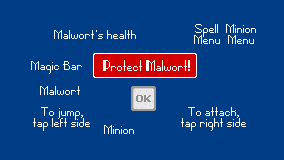
<style>
.page{position:relative;width:284px;height:160px;background:#003d87}
.page>*{position:absolute;margin:0}
.t1{font:8px "Pixel-Noir-Skinny-Short";color:#ffffff}
.t2{font:8px/11px "Pixel-Noir-Skinny-Short";color:#ffffff}
.t3{font:8px "Pixel-Noir-Regular";color:#ffffff}
.t4{font:8px "PressStart2P";color:#8e8e8e}
</style>
<div class="page">
<p class="t1" style="left:54px;top:30px;width:82px;height:9px">Malwort s health</p>
<p class="t2" style="left:194px;top:24px;width:26px;height:20px;text-align:center">Spell<br>Menu</p>
<p class="t2" style="left:226px;top:24px;width:30px;height:20px;text-align:center">Minion<br>Menu</p>
<p class="t1" style="left:31px;top:61px;width:51px;height:13px">Magic Bar</p>
<p class="t3" style="left:103px;top:60px;width:87px;height:11px">Protect Malwort!</p>
<p class="t1" style="left:40px;top:86px;width:40px;height:9px">Malwort</p>
<p class="t4" style="left:136px;top:95px;width:15px;height:7px">OK</p>
<p class="t2" style="left:33px;top:107px;width:57px;height:24px;text-align:center">To jump,<br>tap left side</p>
<p class="t2" style="left:181px;top:107px;width:65px;height:24px;text-align:center">To attack,<br>tap right side</p>
<p class="t1" style="left:104px;top:125px;width:30px;height:9px">Minion</p>
</div>
